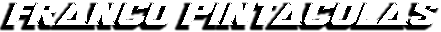
<style>
.page{position:relative;width:441px;height:32px;background:#ffffff}
.page>*{position:absolute;margin:0}
.t1{font:34.3px "RushDriver-Italic";color:#ffffff;scale:1.11 1}
</style>
<div class="page">
<p class="t1" style="left:6px;top:0px;width:436px;height:25px">FRANCO PINTACOLAS</p>
</div>
